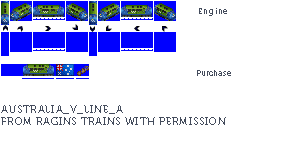
<style>
.page{position:relative;width:300px;height:159px;background:#ffffff}
.page>*{position:absolute;margin:0}
.t1{font:8px "Museo700-Regular";letter-spacing:0.075em;color:#444c5c}
.t2{font:8px "Museo700-Regular";color:#444c5c}
.t3{font:10px "Museo700-Regular";letter-spacing:0.075em;color:#444c5c;text-transform:uppercase}
</style>
<div class="page">
<p class="t1" style="left:199px;top:8px;width:28px;height:8px">Engine</p>
<p class="t2" style="left:197px;top:70px;width:34px;height:6px">Purchase</p>
<p class="t3" style="left:1px;top:105px;width:225px;height:20px">Australia_V_Line_A<br>from ragins trains with permission</p>
</div>
